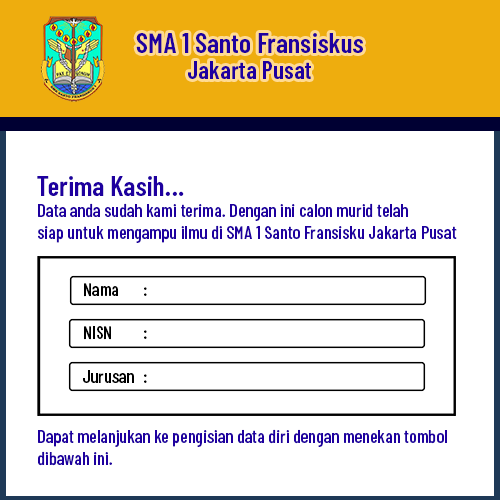
<style>
.page{position:relative;width:500px;height:500px;background:#ffffff}
.page>*{position:absolute;margin:0}
.t1{font:27.8px "BarlowCondensed-SemiBold";color:#1e009f}
.t2{font:25px "BarlowCondensed-SemiBold";color:#1e009f}
.t3{font:18.1px/22.2px "BarlowCondensed-Medium";color:#1e009f}
.t4{font:18.1px "BarlowCondensed-Medium";color:#000000}
</style>
<div class="page">
<p class="t1" style="left:136px;top:33px;width:227px;height:20px">SMA 1 Santo Fransiskus</p>
<p class="t2" style="left:188px;top:61px;width:123px;height:18px">Jakarta Pusat</p>
<p class="t1" style="left:37px;top:176px;width:147px;height:20px">Terima Kasih...</p>
<p class="t3" style="left:38px;top:203px;width:419px;height:40px">Data anda sudah kami terima. Dengan ini calon murid telah<br>siap untuk mengampu ilmu di SMA 1 Santo Fransisku Jakarta Pusat</p>
<p class="t4" style="left:84px;top:283px;width:63px;height:14px">Nama   :</p>
<p class="t4" style="left:84px;top:326px;width:63px;height:14px">NISN   :</p>
<p class="t4" style="left:83px;top:370px;width:64px;height:13px">Jurusan :</p>
<p class="t3" style="left:38px;top:429px;width:409px;height:37px">Dapat melanjukan ke pengisian data diri dengan menekan tombol<br>dibawah ini.</p>
</div>
